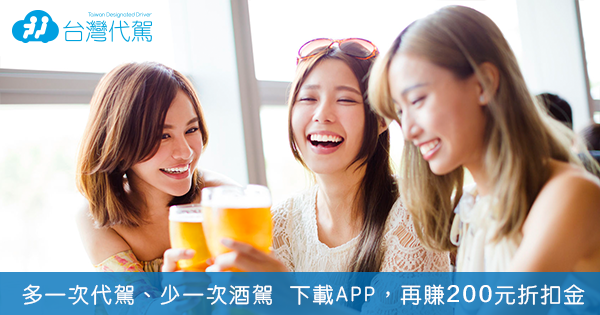
<style>
.page{position:relative;width:600px;height:315px}
.page>*{position:absolute;margin:0}
.t1{font:20.9px "STYuanti-TC-Regular";letter-spacing:0.1em;color:#ffffff}
.t2{font:20.9px "FZLTZHK--GBK1-0";letter-spacing:0.1em;color:#ffffff}
</style>
<div class="page">
<p class="t1" style="left:22px;top:284px;width:563px;height:21px">多一次代駕、少一次酒駕  下載APP，再賺<span class="t2">200</span>元折扣金</p>
</div>
